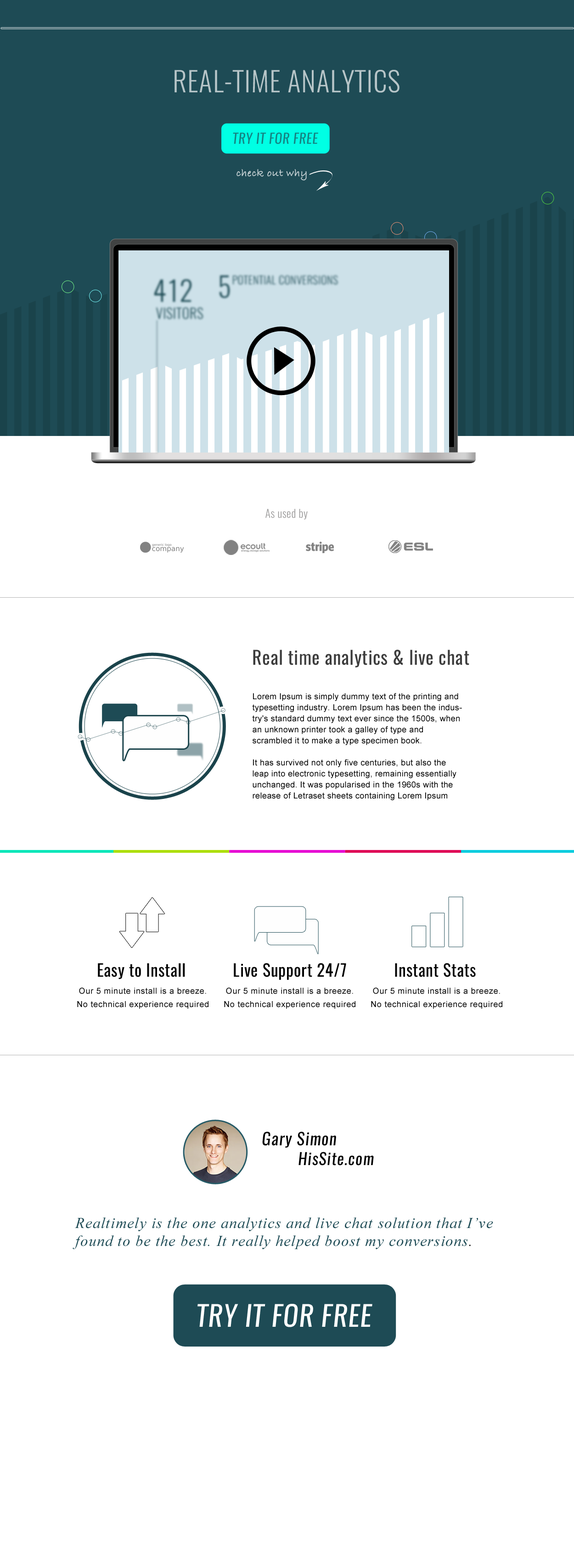
<style>
.page{position:relative;width:574px;height:1568px;background:#ffffff}
.page>*{position:absolute;margin:0}
.t1{font:27.6px "Oswald-Light";letter-spacing:0.025em;color:#b7c5c8}
.t2{font:13.7px "Oswald-RegularItalic";letter-spacing:0.025em;color:#148583}
.t3{font:11px "BradleyHandITCTTBold";letter-spacing:0.025em;color:#cbd5d8}
.t4{font:11px "Oswald-Light";letter-spacing:0.025em;color:#9a9999}
.t5{font:18.4px "Oswald-Regular";letter-spacing:0.025em;color:#3c3c3c}
.t6{font:8.3px/11px "ArialMT";letter-spacing:0.025em;color:#000000}
.t7{font:5.5px/11px "Oswald-Light";letter-spacing:0.025em;color:#ffffff}
.t8{font:16.5px "Oswald-Regular";letter-spacing:0.025em;color:#000000}
.t9{font:8.3px/13.3px "ArialMT";letter-spacing:0.045em;color:#010101}
.t10{font:16.5px "Oswald-RegularItalic";letter-spacing:0.045em;color:#000000}
.t11{font:16.1px "Oswald-RegularItalic";letter-spacing:0.045em;color:#000000}
.t12{font:15.2px "TimesNewRomanPS-ItalicMT";letter-spacing:0.045em;color:#1e4b55}
.t13{font:15.2px "TimesNewRomanPS-ItalicMT";letter-spacing:0.045em;color:#000000}
.t14{font:28.2px "Oswald-RegularItalic";letter-spacing:0.025em;color:#ffffff}
</style>
<div class="page">
<p class="t1" style="left:175px;top:70px;width:225px;height:23px">REAL-TIME ANALYTICS</p>
<p class="t2" style="left:233px;top:132px;width:85px;height:12px">TRY IT FOR FREE</p>
<p class="t3" style="left:237px;top:169px;width:70px;height:12px">check out why</p>
<p class="t4" style="left:266px;top:509px;width:42px;height:11px">As used by</p>
<p class="t5" style="left:253px;top:650px;width:217px;height:18px">Real time analytics &amp; live chat</p>
<p class="t6" style="left:252px;top:693px;width:210px;height:107px">Lorem Ipsum is simply dummy text of the printing and typesetting industry. Lorem Ipsum has been the industry's standard dummy text ever since the 1500s, when an unknown printer took a galley of type and scrambled it to make a type specimen book. <br><br>It has survived not only five centuries, but also the leap into electronic typesetting, remaining essentially unchanged. It was popularised in the 1960s with the release of Letraset sheets containing Lorem Ipsum <span class="t7">passages</span></p>
<p class="t8" style="left:98px;top:963px;width:87px;height:16px">Easy to Install</p>
<p class="t8" style="left:234px;top:963px;width:112px;height:17px">Live Support 24/7</p>
<p class="t8" style="left:395px;top:963px;width:81px;height:14px">Instant Stats</p>
<p class="t9" style="left:77px;top:987px;width:132px;height:22px;text-align:center">Our 5 minute install is a breeze. No technical experience required</p>
<p class="t9" style="left:224px;top:987px;width:132px;height:22px;text-align:center">Our 5 minute install is a breeze. No technical experience required</p>
<p class="t9" style="left:371px;top:987px;width:132px;height:22px;text-align:center">Our 5 minute install is a breeze. No technical experience required</p>
<p class="t10" style="left:262px;top:1132px;width:74px;height:16px">Gary Simon</p>
<p class="t11" style="left:299px;top:1152px;width:75px;height:14px">HisSite.com</p>
<p class="t12" style="left:73px;top:1217px;width:420px;height:32px">Realtimely is the one analytics and live chat solution that I’ve found to be the best. It really helped boost my conversions<span class="t13">.</span></p>
<p class="t14" style="left:198px;top:1304px;width:175px;height:23px">TRY IT FOR FREE</p>
</div>
